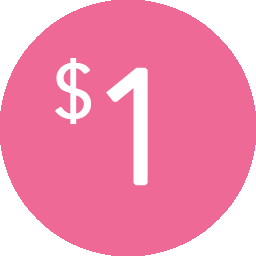
<style>
.page{position:relative;width:256px;height:256px;background:#ef6996}
.page>*{position:absolute;margin:0}
.t1{font:128px "Avenir-Light";color:#ffffff;font-weight:bold}
.t2{font:160px "Avenir-Light";letter-spacing:-0.12em;color:#ffffff;font-weight:bold}
</style>
<div class="page">
<p class="t1" style="left:55px;top:58px;width:93px;height:128px">$<span class="t2">1</span></p>
</div>
